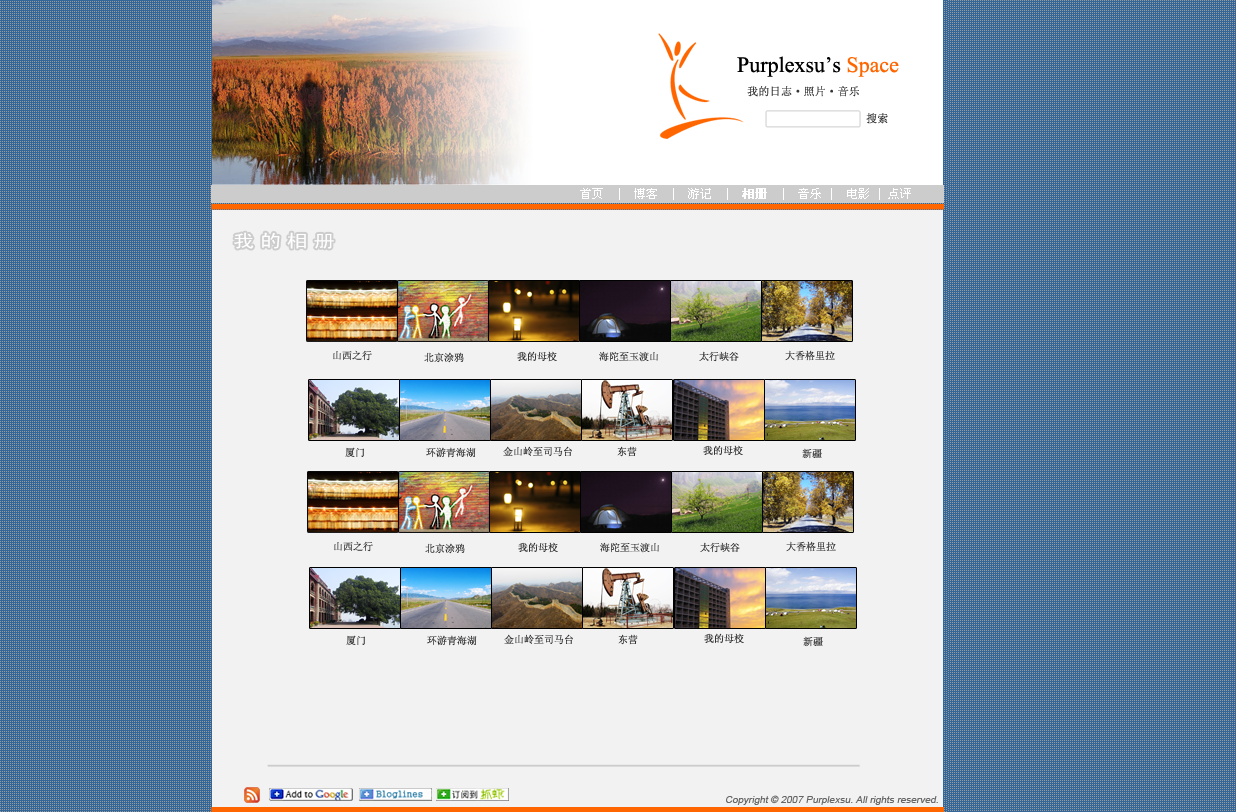
<style>
.page{position:relative;width:1236px;height:812px;background:#336699}
.page>*{position:absolute;margin:0}
.t1{font:22px "TimesNewRomanPSMT";color:#000000}
.t2{font:22px "TimesNewRomanPSMT";color:#ff6600}
.t3{font:11px "SimSun";color:#333333;font-weight:bold}
.t4{font:12px "SimSun";color:#ffffff}
.t5{font:12px "SimSun";color:#ffffff;font-weight:bold}
.t6{font:18px "SimHei";letter-spacing:0.24em;color:#ffffff;scale:1.2 1}
.t7{font:10px "SimSun";color:#333333}
.t8{font:10px "ArialMT";color:#666666;font-style:italic}
</style>
<div class="page">
<p class="t1" style="left:737px;top:56px;width:162px;height:21px">Purplexsu’s <span class="t2">Space</span></p>
<p class="t3" style="left:747px;top:86px;width:112px;height:11px">我的日志·照片·音乐</p>
<p class="t3" style="left:866px;top:113px;width:22px;height:11px">搜索</p>
<p class="t4" style="left:580px;top:188px;width:331px;height:12px">首页  |  博客  |  游记  |  <span class="t5">相册</span>  |  音乐 |  电影 | 点评</p>
<p class="t6" style="left:234px;top:232px;width:100px;height:17px">我的相册</p>
<p class="t7" style="left:333px;top:350px;width:39px;height:11px">山西之行</p>
<p class="t7" style="left:424px;top:352px;width:40px;height:11px">北京涂鸦</p>
<p class="t7" style="left:517px;top:351px;width:40px;height:11px">我的母校</p>
<p class="t7" style="left:599px;top:351px;width:59px;height:11px">海陀至玉渡山</p>
<p class="t7" style="left:699px;top:351px;width:40px;height:11px">太行峡谷</p>
<p class="t7" style="left:785px;top:350px;width:50px;height:11px">大香格里拉</p>
<p class="t7" style="left:345px;top:447px;width:19px;height:10px">厦门</p>
<p class="t7" style="left:426px;top:447px;width:50px;height:11px">环游青海湖</p>
<p class="t7" style="left:503px;top:446px;width:69px;height:11px">金山岭至司马台</p>
<p class="t7" style="left:617px;top:446px;width:20px;height:11px">东营</p>
<p class="t7" style="left:703px;top:445px;width:40px;height:11px">我的母校</p>
<p class="t7" style="left:802px;top:448px;width:20px;height:11px">新疆</p>
<p class="t7" style="left:334px;top:541px;width:39px;height:11px">山西之行</p>
<p class="t7" style="left:425px;top:543px;width:40px;height:11px">北京涂鸦</p>
<p class="t7" style="left:518px;top:542px;width:40px;height:11px">我的母校</p>
<p class="t7" style="left:600px;top:542px;width:59px;height:11px">海陀至玉渡山</p>
<p class="t7" style="left:700px;top:542px;width:40px;height:11px">太行峡谷</p>
<p class="t7" style="left:786px;top:541px;width:50px;height:11px">大香格里拉</p>
<p class="t7" style="left:346px;top:635px;width:19px;height:10px">厦门</p>
<p class="t7" style="left:427px;top:635px;width:50px;height:11px">环游青海湖</p>
<p class="t7" style="left:504px;top:634px;width:69px;height:11px">金山岭至司马台</p>
<p class="t7" style="left:618px;top:634px;width:20px;height:11px">东营</p>
<p class="t7" style="left:704px;top:633px;width:40px;height:11px">我的母校</p>
<p class="t7" style="left:803px;top:636px;width:20px;height:11px">新疆</p>
<p class="t8" style="left:726px;top:795px;width:212px;height:10px">Copyright © 2007 Purplexsu. All rights reserved.</p>
</div>
